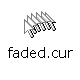
<style>
.page{position:relative;width:80px;height:80px;background:#ffffff}
.page>*{position:absolute;margin:0}
.t1{font:14px "MSReferenceSansSerif";color:#000000}
</style>
<div class="page">
<p class="t1" style="left:8px;top:47px;width:65px;height:11px">faded.cur</p>
</div>
